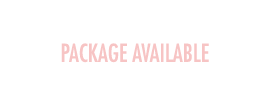
<style>
.page{position:relative;width:270px;height:110px;background:#ffffff}
.page>*{position:absolute;margin:0}
.t1{font:24px "FuturaLT-Condensed";color:#f7c4c4;text-transform:uppercase}
</style>
<div class="page">
<p class="t1" style="left:61px;top:43px;width:148px;height:20px">Package available</p>
</div>
